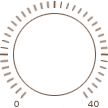
<style>
.page{position:relative;width:108px;height:108px;background:#ffffff}
.page>*{position:absolute;margin:0}
.t1{font:9px "UniversCE-Medium";color:#76604f;scale:1.15 1}
</style>
<div class="page">
<p class="t1" style="left:14px;top:100px;width:5px;height:7px">0</p>
<p class="t1" style="left:88px;top:100px;width:11px;height:7px">40</p>
</div>
